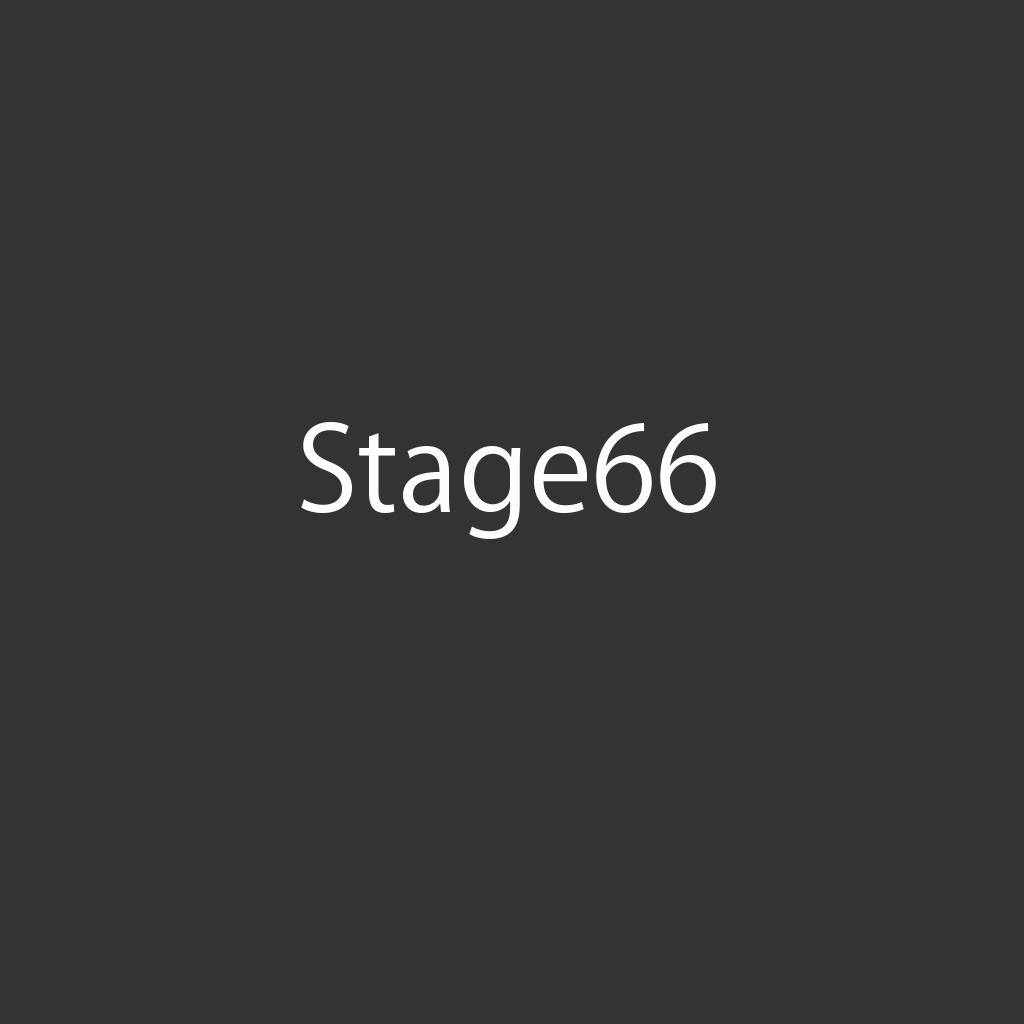
<style>
.page{position:relative;width:1024px;height:1024px;background:#333333}
.page>*{position:absolute;margin:0}
.t1{font:116.7px "KozGoPr6N-Regular";color:#fefefe}
</style>
<div class="page">
<p class="t1" style="left:301px;top:421px;width:415px;height:118px">Stage66</p>
</div>
